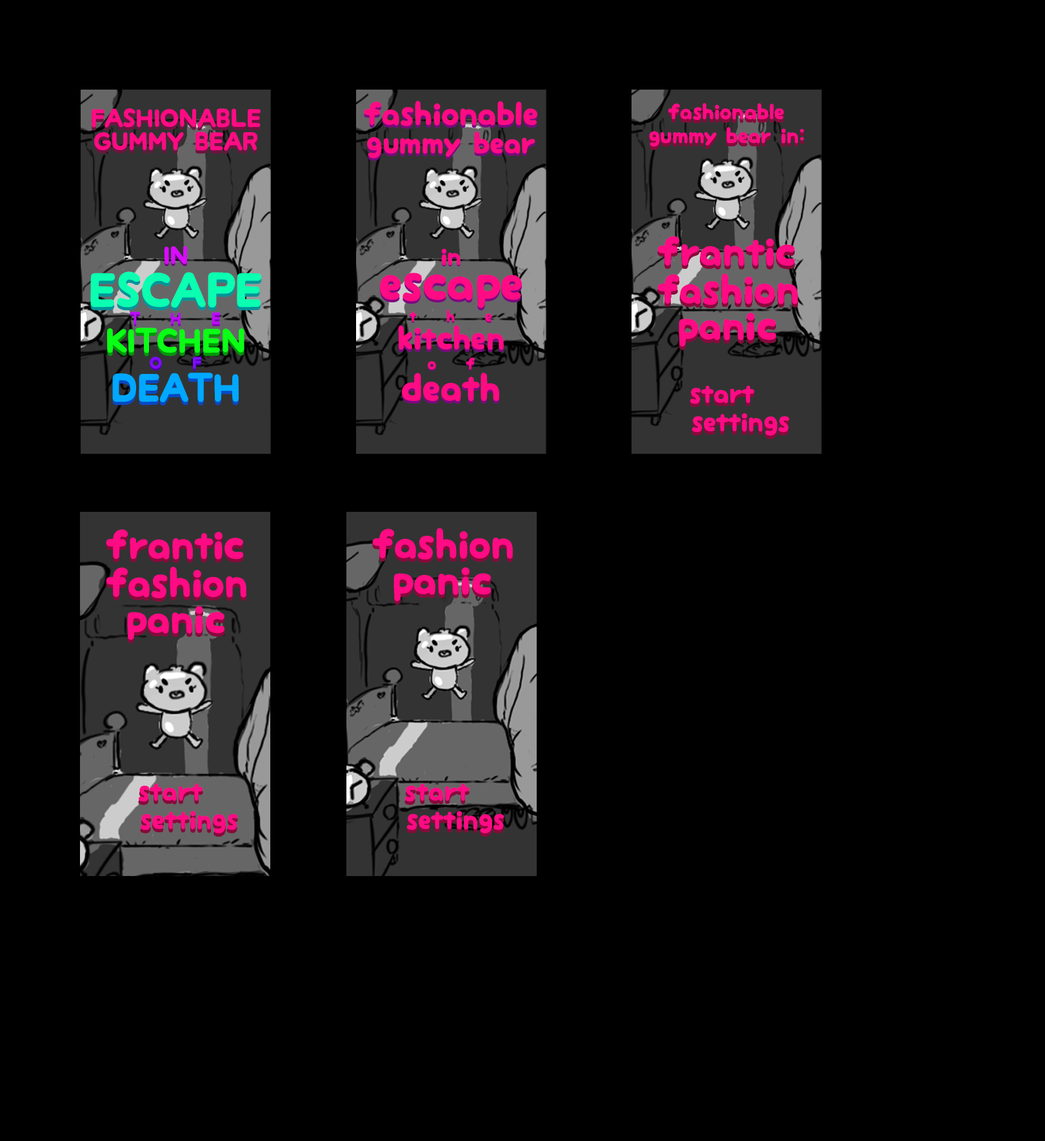
<style>
.page{position:relative;width:1045px;height:1141px;background:#000000}
.page>*{position:absolute;margin:0}
.t1{font:32.2px "mini-wakuwaku";letter-spacing:-0.06em;color:#ff0b84}
.t2{font:24.2px "mini-wakuwaku";letter-spacing:-0.06em;text-transform:uppercase}
.t3{font:24.2px "mini-wakuwaku";letter-spacing:-0.06em;color:#ff0b84;text-transform:uppercase}
.t4{font:21.5px/23.8px "mini-wakuwaku";letter-spacing:-0.06em;color:#ff0b84}
.t5{font:29.6px "mini-wakuwaku";letter-spacing:-0.06em}
.t6{font:29.6px "mini-wakuwaku";letter-spacing:-0.06em;color:#ff0b84}
.t7{font:40.3px "mini-wakuwaku";letter-spacing:-0.06em;color:#ff0b84}
.t8{font:24.2px "mini-wakuwaku";letter-spacing:-0.06em;color:#da0bff;text-transform:uppercase}
.t9{font:24.2px "mini-wakuwaku";letter-spacing:-0.06em;color:#ff0b84}
.t10{font:45.7px "mini-wakuwaku";letter-spacing:-0.06em;color:#0bffb1;text-transform:uppercase}
.t11{font:48.4px "mini-wakuwaku";letter-spacing:-0.06em;color:#ff0b84}
.t12{font:16.1px "mini-wakuwaku";letter-spacing:1.92em;text-transform:uppercase;scale:0.94 1}
.t13{font:16.1px "mini-wakuwaku";letter-spacing:1.92em;color:#bd0bff;text-transform:uppercase;scale:0.94 1}
.t14{font:16.1px "mini-wakuwaku";letter-spacing:1.92em;scale:0.94 1}
.t15{font:16.1px "mini-wakuwaku";letter-spacing:1.92em;color:#ff0b84;scale:0.94 1}
.t16{font:32.2px "mini-wakuwaku";letter-spacing:-0.06em;color:#0bff16;text-transform:uppercase}
.t17{font:32.2px "mini-wakuwaku";letter-spacing:-0.06em;text-transform:uppercase}
.t18{font:16.1px "mini-wakuwaku";letter-spacing:1.8em;text-transform:uppercase}
.t19{font:16.1px "mini-wakuwaku";letter-spacing:1.8em;color:#7e0bff;text-transform:uppercase}
.t20{font:16.1px "mini-wakuwaku";letter-spacing:1.8em}
.t21{font:16.1px "mini-wakuwaku";letter-spacing:1.8em;color:#ff0b84}
.t22{font:37.6px "mini-wakuwaku";letter-spacing:-0.06em;color:#00a8ff;text-transform:uppercase}
.t23{font:37.6px "mini-wakuwaku";letter-spacing:-0.06em;color:#ff0b84}
.t24{font:26.9px "mini-wakuwaku";letter-spacing:-0.06em;color:#ff0b84}
</style>
<div class="page">
<p class="t1" style="left:364px;top:101px;width:173px;height:25px">fashionable</p>
<p class="t2" style="left:92px;top:112px;width:169px;height:19px">Fashionable</p>
<p class="t3" style="left:92px;top:108px;width:169px;height:20px">Fashionable</p>
<p class="t1" style="left:364px;top:103px;width:173px;height:26px">fashionable</p>
<p class="t4" style="left:649px;top:103px;width:155px;height:44px;text-align:center">fashionable<br>gummy bear in:</p>
<p class="t2" style="left:94px;top:135px;width:163px;height:19px">Gummy Bear</p>
<p class="t3" style="left:94px;top:132px;width:163px;height:19px">Gummy Bear</p>
<p class="t5" style="left:367px;top:134px;width:168px;height:27px">gummy bear</p>
<p class="t6" style="left:367px;top:132px;width:168px;height:27px">gummy bear</p>
<p class="t7" style="left:657px;top:236px;width:137px;height:30px">frantic</p>
<p class="t8" style="left:164px;top:248px;width:23px;height:18px">in</p>
<p class="t8" style="left:164px;top:246px;width:23px;height:18px">in</p>
<p class="t9" style="left:441px;top:250px;width:19px;height:17px">in</p>
<p class="t9" style="left:441px;top:249px;width:19px;height:17px">in</p>
<p class="t10" style="left:90px;top:275px;width:172px;height:36px">Escape</p>
<p class="t10" style="left:90px;top:271px;width:172px;height:37px">Escape</p>
<p class="t11" style="left:380px;top:275px;width:142px;height:36px">escape</p>
<p class="t11" style="left:380px;top:273px;width:142px;height:35px">escape</p>
<p class="t7" style="left:657px;top:273px;width:141px;height:32px">fashion</p>
<p class="t12" style="left:130px;top:313px;width:91px;height:14px">The</p>
<p class="t13" style="left:130px;top:311px;width:91px;height:14px">The</p>
<p class="t14" style="left:409px;top:311px;width:83px;height:12px">the</p>
<p class="t15" style="left:409px;top:310px;width:83px;height:12px">the</p>
<p class="t7" style="left:678px;top:313px;width:98px;height:34px">panic</p>
<p class="t16" style="left:107px;top:328px;width:137px;height:25px">kitchen</p>
<p class="t1" style="left:398px;top:328px;width:106px;height:25px">kitchen</p>
<p class="t1" style="left:398px;top:325px;width:106px;height:25px">kitchen</p>
<p class="t17" style="left:107px;top:331px;width:137px;height:26px">kitchen</p>
<p class="t18" style="left:150px;top:359px;width:52px;height:12px">of</p>
<p class="t19" style="left:150px;top:357px;width:52px;height:13px">of</p>
<p class="t20" style="left:428px;top:359px;width:47px;height:12px">of</p>
<p class="t21" style="left:428px;top:357px;width:47px;height:13px">of</p>
<p class="t22" style="left:112px;top:376px;width:127px;height:30px">death</p>
<p class="t22" style="left:112px;top:373px;width:127px;height:29px">death</p>
<p class="t23" style="left:402px;top:375px;width:97px;height:29px">death</p>
<p class="t23" style="left:402px;top:373px;width:97px;height:29px">death</p>
<p class="t24" style="left:689px;top:386px;width:65px;height:18px">start</p>
<p class="t24" style="left:691px;top:413px;width:98px;height:23px">settings</p>
<p class="t7" style="left:106px;top:529px;width:137px;height:31px">frantic</p>
<p class="t7" style="left:372px;top:528px;width:141px;height:32px">fashion</p>
<p class="t7" style="left:106px;top:567px;width:140px;height:31px">fashion</p>
<p class="t7" style="left:393px;top:567px;width:98px;height:35px">panic</p>
<p class="t7" style="left:127px;top:606px;width:97px;height:34px">panic</p>
<p class="t24" style="left:138px;top:784px;width:65px;height:18px">start</p>
<p class="t24" style="left:404px;top:784px;width:65px;height:18px">start</p>
<p class="t24" style="left:140px;top:811px;width:98px;height:23px">settings</p>
<p class="t24" style="left:406px;top:811px;width:98px;height:23px">settings</p>
</div>
